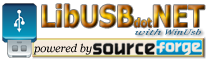
<style>
.page{position:relative;width:208px;height:61px;background:#ffffff}
.page>*{position:absolute;margin:0}
.t1{font:30px "Tahoma-Bold";scale:0.88 1}
.t2{font:12px "Tahoma-Bold";scale:0.88 1}
.t3{font:7.5px "Georgia-Italic";letter-spacing:0.02em;color:#195981;font-style:italic;scale:1.33 1}
.t4{font:7.5px "Georgia-Italic";letter-spacing:0.02em;color:#195981;font-style:italic;scale:1.69 1}
.t5{font:11px "Georgia-Italic";color:#000000}
</style>
<div class="page">
<p class="t1" style="left:42px;top:4px;width:163px;height:24px">LibUSB<span class="t2">dot</span>NET</p>
<p class="t3" style="left:135px;top:29px;width:66px;height:6px"><span class="t4">with</span> WinUsb</p>
<p class="t5" style="left:33px;top:43px;width:59px;height:12px">powered by</p>
</div>
